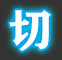
<style>
.page{position:relative;width:62px;height:60px;background:#333333}
.page>*{position:absolute;margin:0}
.t1{font:44.9px "FZCHSJW--GB1-0";color:#ffffff}
</style>
<div class="page">
<p class="t1" style="left:9px;top:10px;width:42px;height:41px">切</p>
</div>
